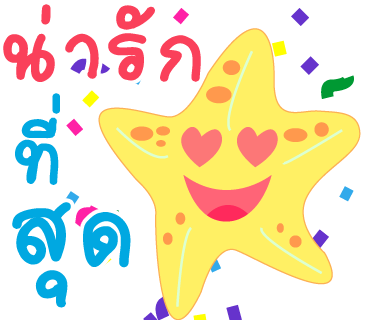
<style>
.page{position:relative;width:370px;height:320px;background:#ffffff}
.page>*{position:absolute;margin:0}
.t1{font:131px "2005_iannnnnMTV";letter-spacing:0.025em;color:#fa405a;scale:1.06 1}
.t2{font:120px "2005_iannnnnMTV";letter-spacing:0.025em;color:#00a8e1;scale:1.06 1}
.t3{font:150px "2005_iannnnnMTV";letter-spacing:0.025em;color:#00a8e1;scale:1.06 1}
</style>
<div class="page">
<p class="t1" style="left:3px;top:4px;width:198px;height:78px">น่ารัก</p>
<p class="t2" style="left:15px;top:93px;width:45px;height:92px">ที่</p>
<p class="t3" style="left:12px;top:202px;width:119px;height:106px">สุด</p>
</div>
